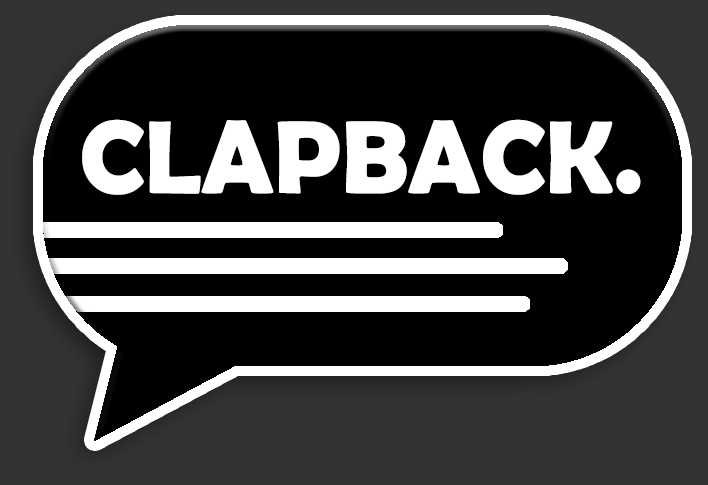
<style>
.page{position:relative;width:708px;height:485px;background:#000000}
.page>*{position:absolute;margin:0}
.t1{font:104.2px "BerlinSansFBDemi-Bold";color:#ffffff}
</style>
<div class="page">
<p class="t1" style="left:82px;top:119px;width:559px;height:76px">CLAPBACK.</p>
</div>
